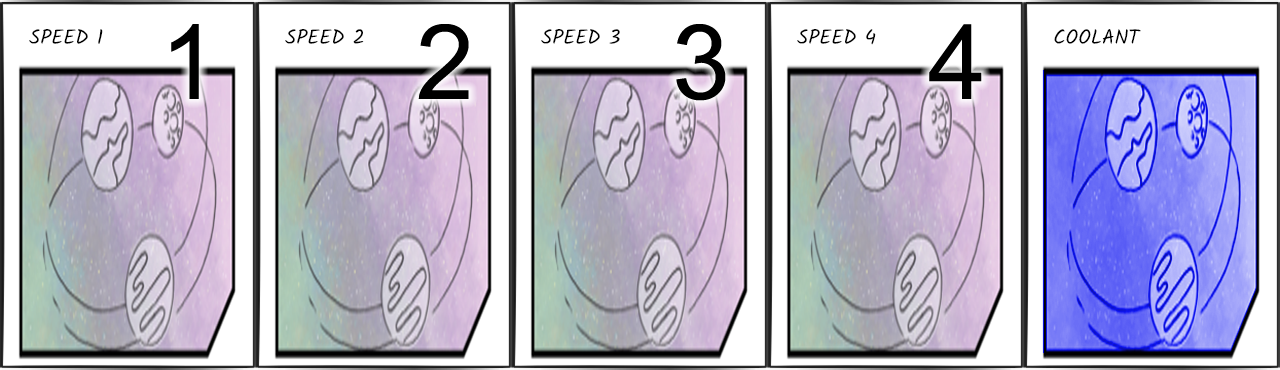
<style>
.page{position:relative;width:1280px;height:370px;background:#ffffff}
.page>*{position:absolute;margin:0}
.t1{font:20.5px "Kalam-Regular";color:#000000}
.t2{font:104.2px "ArialMT";color:#000000}
</style>
<div class="page">
<p class="t1" style="left:29px;top:29px;width:74px;height:15px">SPEED 1</p>
<p class="t2" style="left:171px;top:24px;width:28px;height:75px">1</p>
<p class="t1" style="left:285px;top:29px;width:79px;height:15px">SPEED 2</p>
<p class="t2" style="left:418px;top:24px;width:51px;height:75px">2</p>
<p class="t1" style="left:541px;top:29px;width:79px;height:15px">SPEED 3</p>
<p class="t2" style="left:676px;top:24px;width:50px;height:77px">3</p>
<p class="t1" style="left:797px;top:29px;width:79px;height:16px">SPEED 4</p>
<p class="t2" style="left:929px;top:24px;width:53px;height:75px">4</p>
<p class="t1" style="left:1054px;top:29px;width:87px;height:15px">COOLANT</p>
</div>
